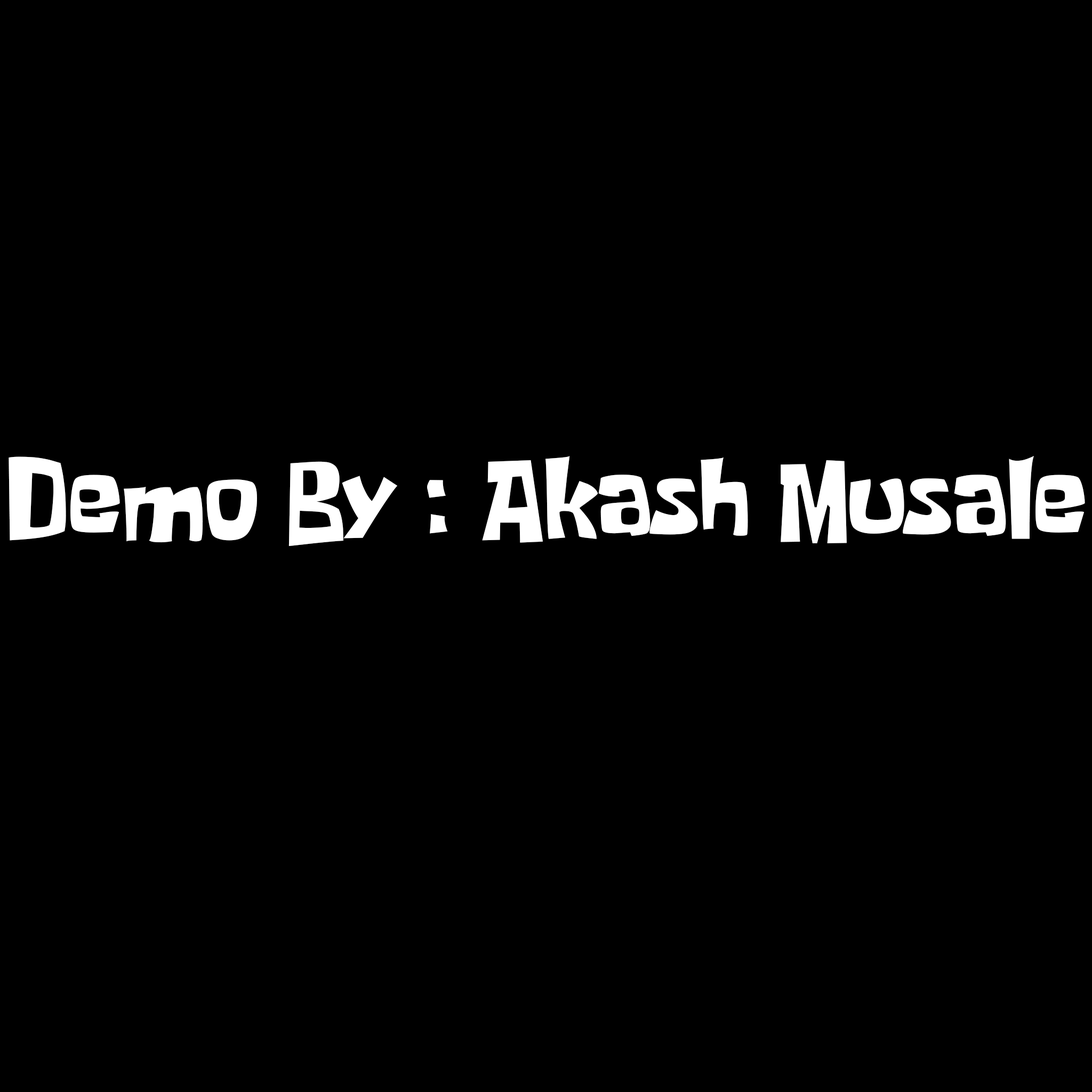
<style>
.page{position:relative;width:1092px;height:1092px;background:#000000}
.page>*{position:absolute;margin:0}
.t1{font:91px "SpongeboyMeBob";color:#ffffff}
</style>
<div class="page">
<p class="t1" style="left:9px;top:456px;width:1076px;height:91px">Demo By : Akash Musale</p>
</div>
